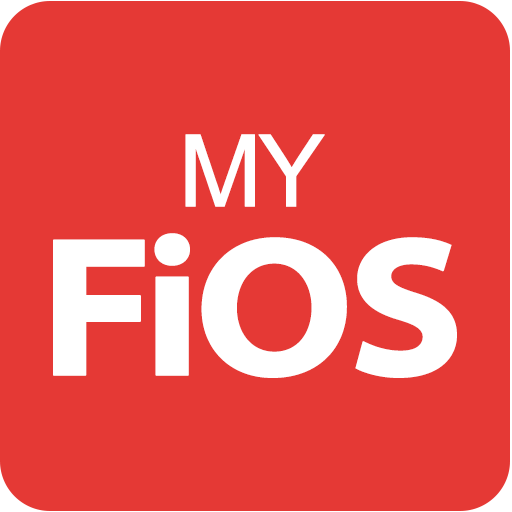
<style>
.page{position:relative;width:512px;height:512px;background:#e53935}
.page>*{position:absolute;margin:0}
.t1{font:100px "ArialMT";letter-spacing:-0.06em;color:#ffffff;font-weight:bold}
.t2{font:200px "MyriadPro-BoldSemiExt";letter-spacing:-0.06em;color:#ffffff;font-weight:bold}
</style>
<div class="page">
<p class="t1" style="left:185px;top:134px;width:140px;height:73px">MY</p>
<p class="t2" style="left:53px;top:233px;width:404px;height:145px">FiOS</p>
</div>
